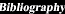
<style>
.page{position:relative;width:65px;height:14px;background:#000000}
.page>*{position:absolute;margin:0}
.t1{font:12px "TimesNewRomanPS-BoldMT";color:#fdfdfe;font-style:italic}
</style>
<div class="page">
<p class="t1" style="left:0px;top:2px;width:66px;height:12px">Bibliography</p>
</div>
